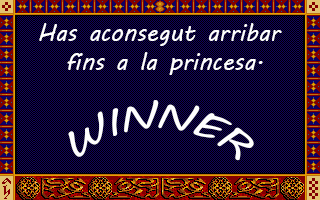
<style>
.page{position:relative;width:320px;height:200px;background:#100061}
.page>*{position:absolute;margin:0}
.t1{font:24px "MVBoli";color:#fefefe}
.t2{font:36px "MVBoli";color:#fefefe}
</style>
<div class="page">
<p class="t1" style="left:39px;top:23px;width:243px;height:52px;text-align:center">Has aconsegut arribar <br>fins a la princesa.</p>
<p class="t2" style="left:68px;top:100px;width:186px;height:61px">WINNER</p>
</div>
